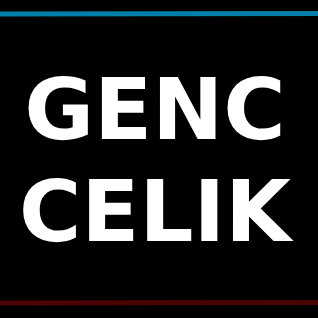
<style>
.page{position:relative;width:318px;height:318px;background:#000000}
.page>*{position:absolute;margin:0}
.t1{font:85px "DejaVuSans-Bold";color:#ffffff}
</style>
<div class="page">
<p class="t1" style="left:23px;top:75px;width:271px;height:168px;text-align:center">GENC<br>CELIK</p>
</div>
